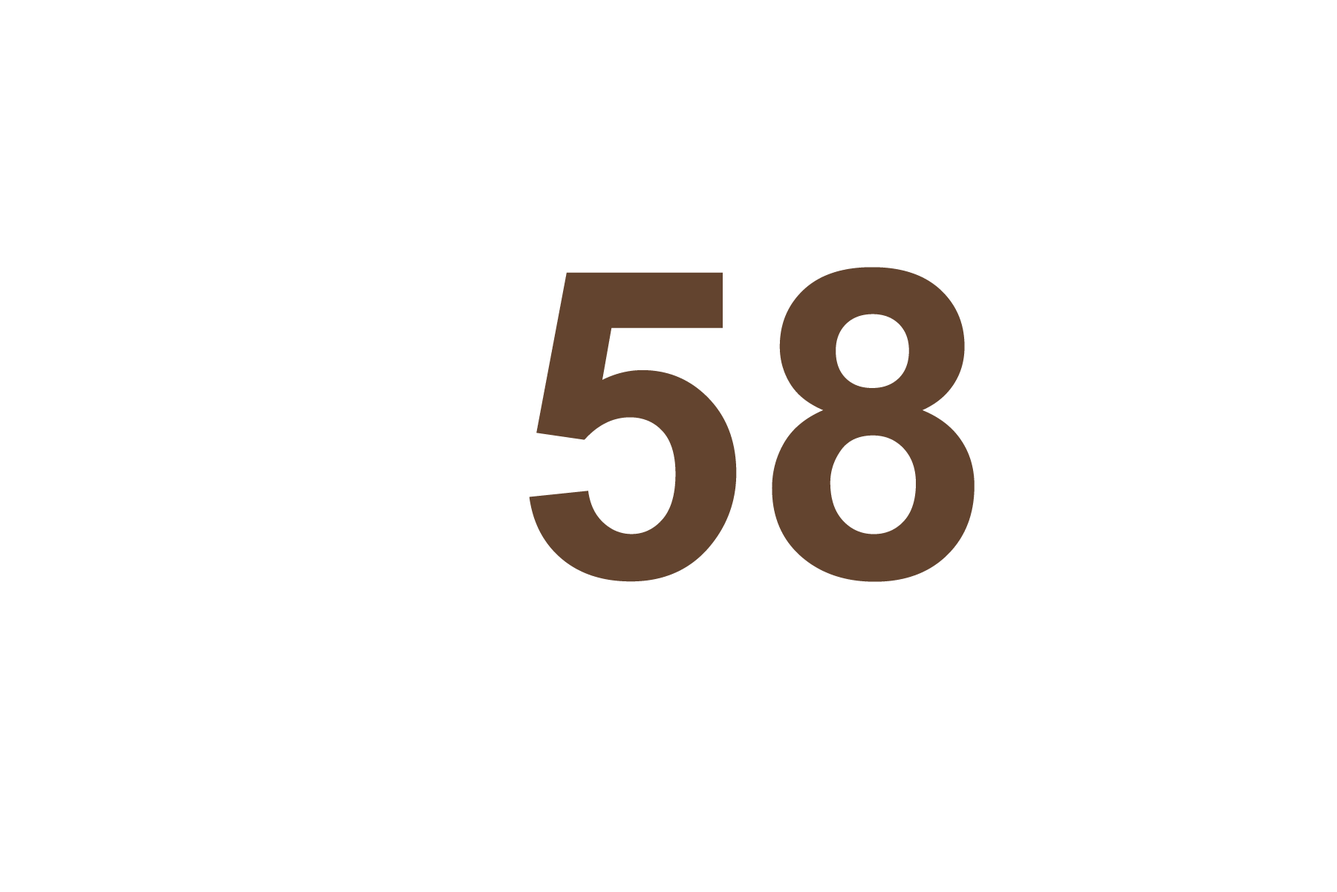
<style>
.page{position:relative;width:1337px;height:892px;background:#ffffff}
.page>*{position:absolute;margin:0}
.t1{font:429.6px "Arial-BoldMT";color:#63442f}
</style>
<div class="page">
<p class="t1" style="left:529px;top:267px;width:446px;height:315px">58</p>
</div>
